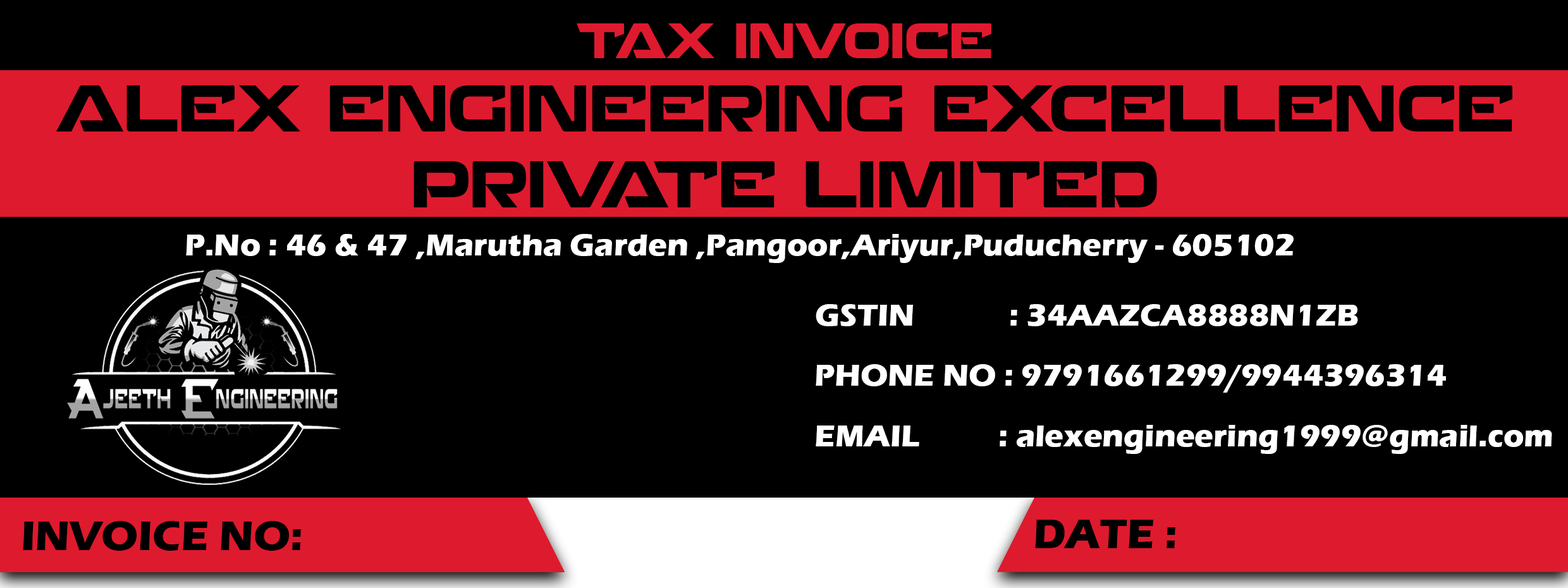
<style>
.page{position:relative;width:1568px;height:588px;background:#000000}
.page>*{position:absolute;margin:0}
.t1{font:47.4px "RechargeRg-Bold";color:#df1a2e}
.t2{font:63.2px "RechargeRg-Bold";color:#000000}
.t3{font:31.6px "ErasITC-Bold";color:#ffffff}
.t4{font:42.2px "ErasITC-Bold";color:#000000}
</style>
<div class="page">
<p class="t1" style="left:577px;top:23px;width:414px;height:35px">TAX INVOICE</p>
<p class="t2" style="left:56px;top:85px;width:1456px;height:122px;text-align:center">ALEX ENGINEERING EXCELLENCE<br>PRIVATE LIMITED</p>
<p class="t3" style="left:186px;top:234px;width:1108px;height:29px">P.No : 46 &amp; 47 ,Marutha Garden ,Pangoor,Ariyur,Puducherry - 605102</p>
<p class="t3" style="left:816px;top:304px;width:542px;height:22px">GSTIN            : 34AAZCA8888N1ZB</p>
<p class="t3" style="left:816px;top:364px;width:630px;height:29px">PHONE NO : 9791661299/9944396314</p>
<p class="t3" style="left:816px;top:425px;width:736px;height:29px">EMAIL          : alexengineering1999@gmail.com</p>
<p class="t4" style="left:23px;top:521px;width:278px;height:30px">INVOICE NO:</p>
<p class="t4" style="left:1035px;top:520px;width:140px;height:28px">DATE :</p>
</div>
